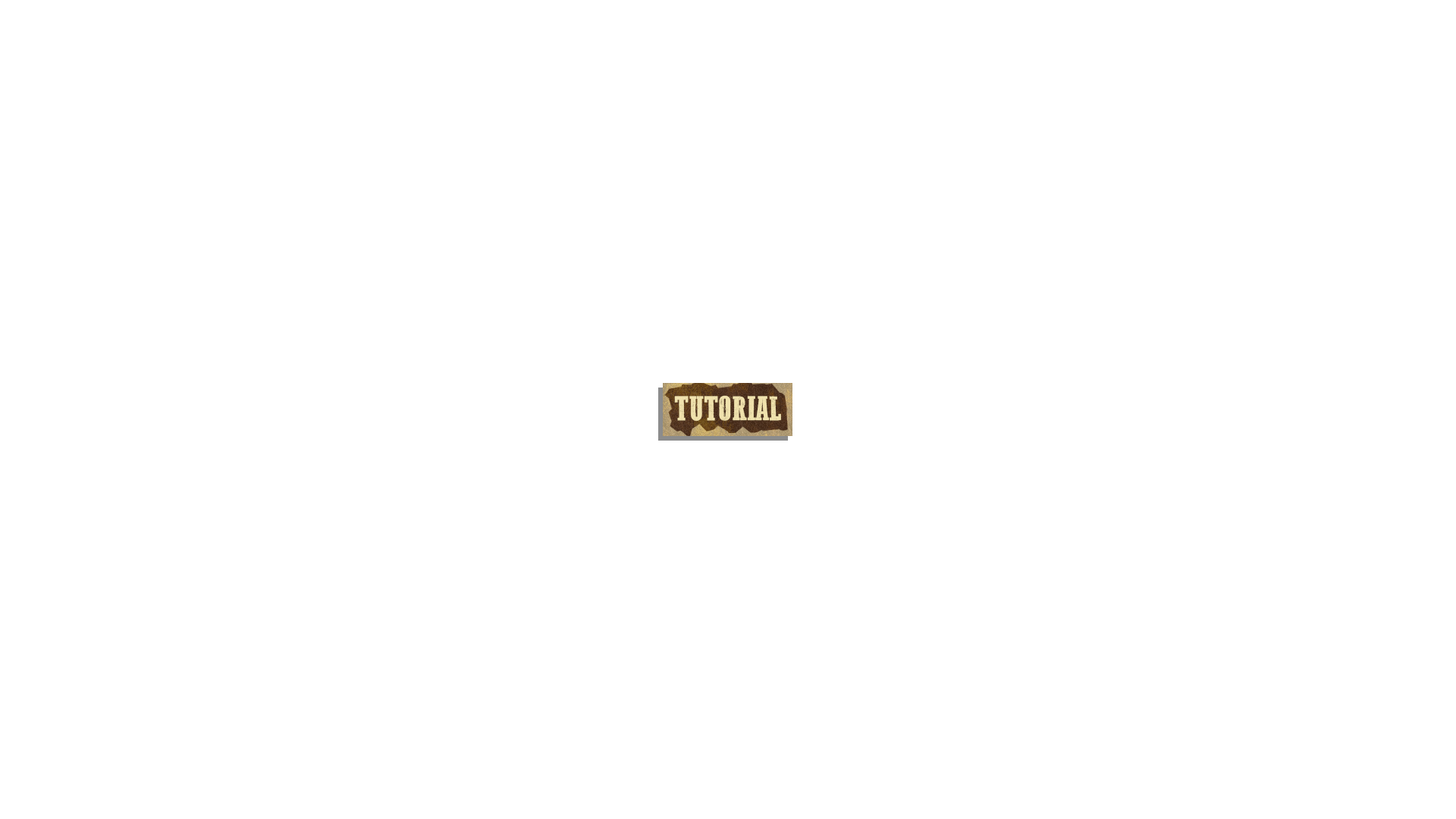
<style>
.page{position:relative;width:1456px;height:819px;background:#ffffff}
.page>*{position:absolute;margin:0}
.t1{font:35.4px "WesternBangBang";color:#f0e2ad}
</style>
<div class="page">
<p class="t1" style="left:674px;top:395px;width:107px;height:28px">TUTORIAL</p>
</div>
